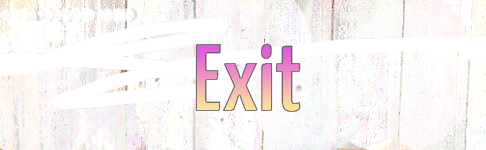
<style>
.page{position:relative;width:486px;height:150px;background:#ffffff}
.page>*{position:absolute;margin:0}
.t1{font:96px "YanoneKaffeesatz-Bold"}
</style>
<div class="page">
<p class="t1" style="left:195px;top:43px;width:106px;height:69px">Exit</p>
</div>
